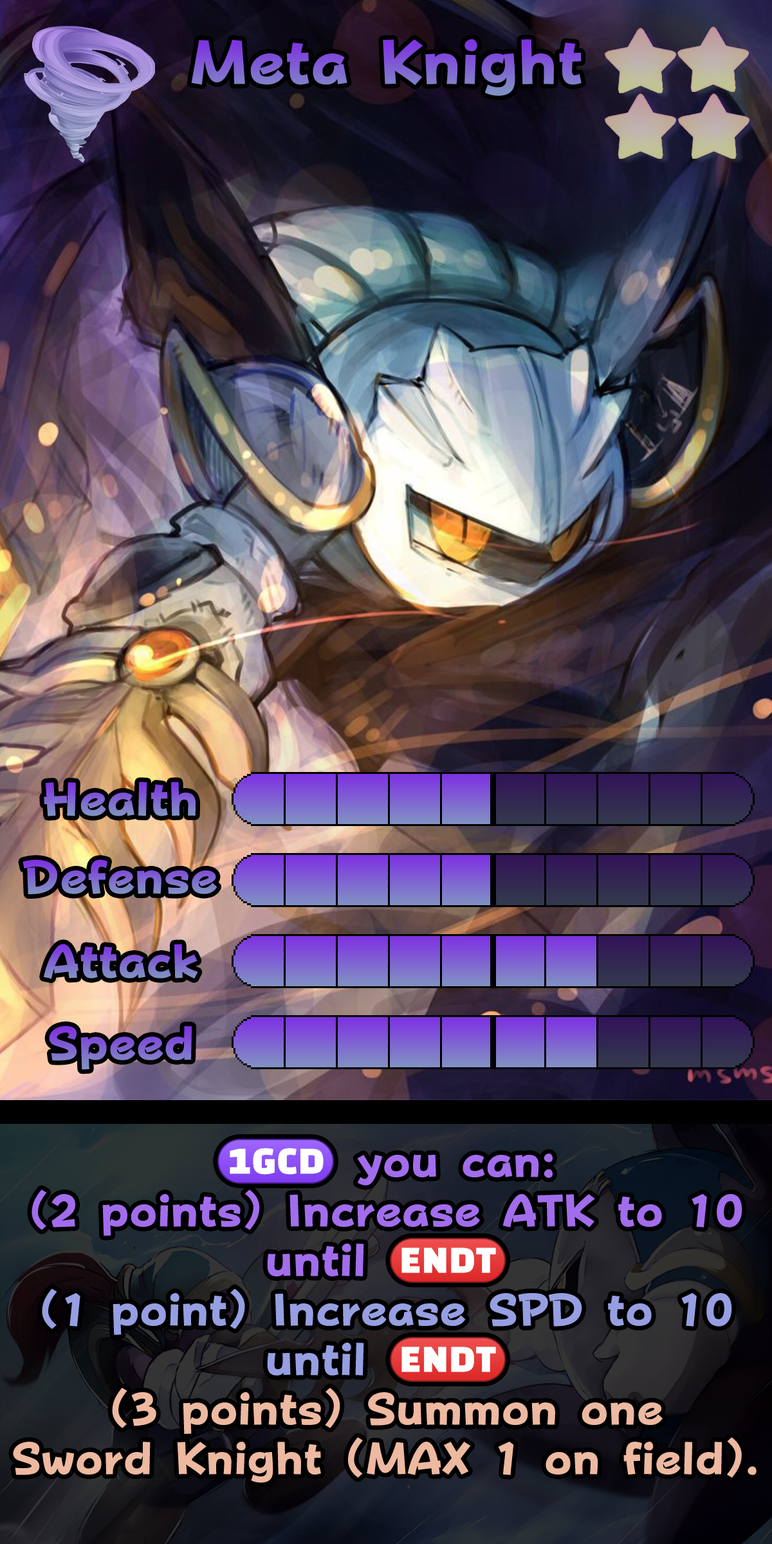
<style>
.page{position:relative;width:772px;height:1544px}
.page>*{position:absolute;margin:0}
.t1{font:106.8px "FOTPopHappinessStrp-ExtraBold"}
.t2{font:80.4px "FOTPopHappinessStrp-ExtraBold"}
.t3{font:77.2px/49.5px "FOTPopHappinessStrp-ExtraBold";color:#edb9a1}
.t4{font:45.9px/49.5px "stoogedings-Regular";color:#a26dec}
.t5{font:77.2px/49.5px "FOTPopHappinessStrp-ExtraBold";color:#a26dec}
.t6{font:78.8px/49.5px "stoogedings-Regular";color:#a26dec}
.t7{font:77.2px/49.5px "FOTPopHappinessStrp-ExtraBold";color:#969fe1}
.t8{font:78.8px/49.5px "stoogedings-Regular";color:#969fe1}
</style>
<div class="page">
<p class="t1" style="left:191px;top:39px;width:391px;height:57px">Meta Knight</p>
<p class="t2" style="left:44px;top:782px;width:152px;height:35px">Health</p>
<p class="t2" style="left:23px;top:860px;width:194px;height:34px">Defense</p>
<p class="t2" style="left:44px;top:944px;width:154px;height:35px">Attack</p>
<p class="t2" style="left:49px;top:1026px;width:143px;height:44px">Speed</p>
<p class="t3" style="left:13px;top:1139px;width:744px;height:344px;text-align:center"><span class="t4">(1GCD)</span><span class="t5"> you can:<br>(2 points) Increase ATK to 10 until </span><span class="t6">(ENDT)<br></span><span class="t7">(1 point) Increase SPD to 10 until </span><span class="t8">(ENDT)<br></span>(3 points) Summon one<br>Sword Knight (MAX 1 on field).</p>
</div>
